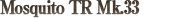
<style>
.page{position:relative;width:178px;height:18px;background:#ffffff}
.page>*{position:absolute;margin:0}
.t1{font:18px "RyuminPro-ExBold";letter-spacing:-0.08em;color:#4a3f32;font-weight:bold;scale:0.9 1}
</style>
<div class="page">
<p class="t1" style="left:0px;top:0px;width:140px;height:18px">Mosquito TR Mk.33</p>
</div>
